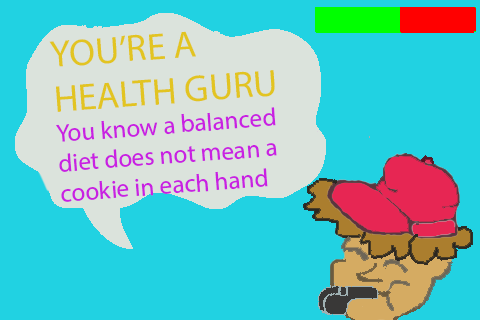
<style>
.page{position:relative;width:480px;height:320px;background:#21d2e2}
.page>*{position:absolute;margin:0}
.t1{font:25px "MyriadHebrew-Regular";color:#c921e2}
.t2{font:37.5px "MyriadHebrew-Regular";color:#e2c421}
</style>
<div class="page">
<p class="t1" style="left:49px;top:31px;width:228px;height:171px;text-align:right;rotate:-4deg"><span class="t2">YOU’RE A HEALTH GURU<br></span>You know a balanced diet does not mean a cookie in each hand</p>
</div>
